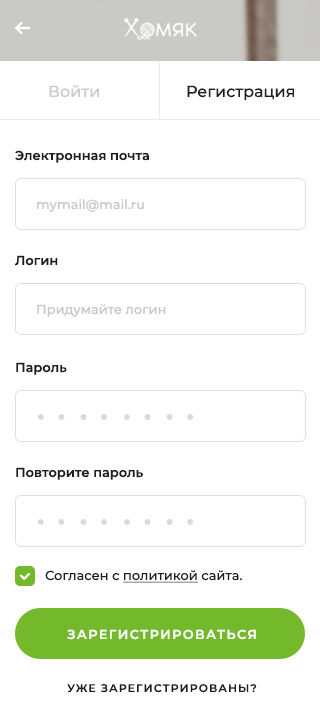
<style>
.page{position:relative;width:320px;height:719px;background:#ffffff}
.page>*{position:absolute;margin:0}
.t1{font:16px "Montserrat-Medium";color:#cccccc}
.t2{font:16px "Montserrat-Medium";color:#1c1e23}
.t3{font:13px "Montserrat-SemiBold";color:#1c1e23}
.t4{font:13px "Montserrat-Medium";color:#c8c8c8}
.t5{font:13px "Montserrat-Medium";color:#1c1e23}
.t6{font:13px "Montserrat-Medium";color:#1c1e23;text-decoration:underline}
.t7{font:13px "Montserrat-SemiBold";letter-spacing:0.1em;color:#ffffff;text-transform:uppercase}
.t8{font:11px "Montserrat-SemiBold";letter-spacing:0.1em;color:#1c1e23;text-transform:uppercase}
</style>
<div class="page">
<p class="t1" style="left:49px;top:85px;width:50px;height:13px">Войти</p>
<p class="t2" style="left:187px;top:85px;width:107px;height:16px">Регистрация</p>
<p class="t3" style="left:15px;top:150px;width:134px;height:13px">Электронная почта</p>
<p class="t4" style="left:37px;top:199px;width:107px;height:13px">mymail@mail.ru</p>
<p class="t3" style="left:15px;top:255px;width:43px;height:11px">Логин</p>
<p class="t4" style="left:37px;top:304px;width:129px;height:13px">Придумайте логин</p>
<p class="t3" style="left:16px;top:362px;width:51px;height:13px">Пароль</p>
<p class="t3" style="left:16px;top:467px;width:127px;height:13px">Повторите пароль</p>
<p class="t5" style="left:45px;top:570px;width:197px;height:13px">Согласен с <span class="t6">политикой</span> сайта.</p>
<p class="t7" style="left:67px;top:629px;width:189px;height:11px">Зарегистрироваться</p>
<p class="t8" style="left:67px;top:684px;width:190px;height:9px">уже зарегистрированы?</p>
</div>
